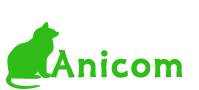
<style>
.page{position:relative;width:199px;height:90px;background:#ffffff}
.page>*{position:absolute;margin:0}
.t1{font:40px "HaanSaleB";color:#30bd19}
</style>
<div class="page">
<p class="t1" style="left:50px;top:49px;width:133px;height:29px">Anicom</p>
</div>
